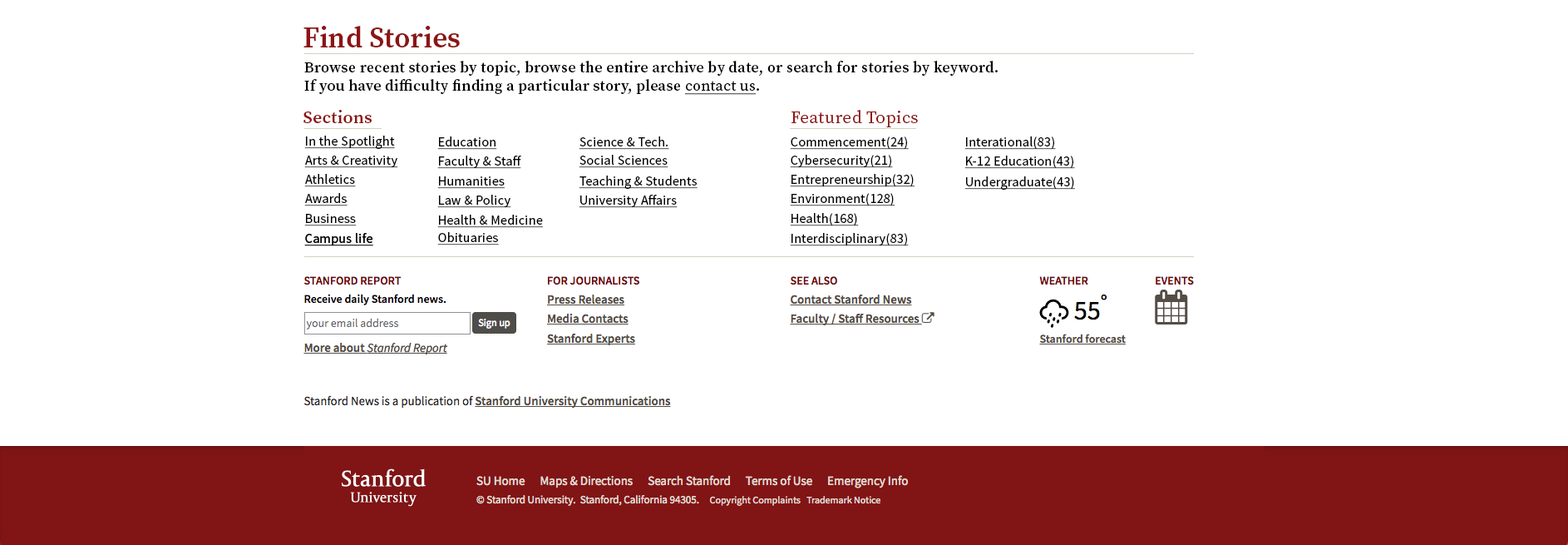
<style>
.page{position:relative;width:1568px;height:545px;background:#ffffff}
.page>*{position:absolute;margin:0}
.t1{font:29.1px "SourceSerifPro-Semibold";color:#8c1515}
.t2{font:15px "SourceSerifPro-Semibold";letter-spacing:0.02em;color:#000000}
.t3{font:15px "SourceSerifPro-Regular";letter-spacing:0.02em;color:#000000;text-decoration:underline}
.t4{font:17.5px "SourceSerifPro-Semibold";letter-spacing:0.02em;color:#8c1515}
.t5{font:17.5px "SourceSerifPro-Regular";letter-spacing:0.02em;color:#8c1515}
.t6{font:13.3px "SourceSansPro-Regular";letter-spacing:0.02em;color:#000000;text-decoration:underline}
</style>
<div class="page">
<p class="t1" style="left:303px;top:26px;width:157px;height:21px">Find Stories</p>
<p class="t2" style="left:304px;top:61px;width:694px;height:34px">Browse recent stories by topic, browse the entire archive by date, or search for stories by keyword. <br>If you have difficulty finding a particular story, please <span class="t3">contact us</span>.</p>
<p class="t4" style="left:303px;top:110px;width:69px;height:13px">Sections</p>
<p class="t5" style="left:791px;top:110px;width:127px;height:17px">Featured Topics</p>
<p class="t6" style="left:304px;top:136px;width:91px;height:13px">In the Spotlight</p>
<p class="t6" style="left:437px;top:136px;width:60px;height:14px">Education</p>
<p class="t6" style="left:579px;top:136px;width:90px;height:14px">Science &amp; Tech.</p>
<p class="t6" style="left:790px;top:136px;width:119px;height:14px">Commencement(24)</p>
<p class="t6" style="left:964px;top:136px;width:92px;height:14px">Interational(83)</p>
<p class="t6" style="left:304px;top:155px;width:94px;height:13px">Arts &amp; Creativity</p>
<p class="t6" style="left:437px;top:155px;width:84px;height:14px">Faculty &amp; Staff</p>
<p class="t6" style="left:579px;top:155px;width:89px;height:13px">Social Sciences</p>
<p class="t6" style="left:790px;top:155px;width:103px;height:13px">Cybersecurity(21)</p>
<p class="t6" style="left:964px;top:155px;width:111px;height:14px">K-12 Education(43)</p>
<p class="t6" style="left:304px;top:174px;width:52px;height:13px">Athletics</p>
<p class="t6" style="left:790px;top:174px;width:125px;height:13px">Entrepreneurship(32)</p>
<p class="t6" style="left:437px;top:176px;width:68px;height:13px">Humanities</p>
<p class="t6" style="left:579px;top:175px;width:119px;height:14px">Teaching &amp; Students</p>
<p class="t6" style="left:964px;top:176px;width:111px;height:14px">Undergraduate(43)</p>
<p class="t6" style="left:304px;top:193px;width:44px;height:13px">Awards</p>
<p class="t6" style="left:437px;top:195px;width:74px;height:13px">Law &amp; Policy</p>
<p class="t6" style="left:579px;top:195px;width:99px;height:13px">University Affairs</p>
<p class="t6" style="left:790px;top:193px;width:105px;height:13px">Environment(128)</p>
<p class="t6" style="left:304px;top:214px;width:53px;height:12px">Business</p>
<p class="t6" style="left:437px;top:214px;width:107px;height:14px">Health &amp; Medicine</p>
<p class="t6" style="left:790px;top:213px;width:69px;height:13px">Health(168)</p>
<p class="t6" style="left:304px;top:233px;width:69px;height:13px">Campus life</p>
<p class="t6" style="left:304px;top:233px;width:69px;height:13px">Campus life</p>
<p class="t6" style="left:437px;top:232px;width:62px;height:13px">Obituaries</p>
<p class="t6" style="left:790px;top:233px;width:119px;height:13px">Interdisciplinary(83)</p>
</div>
